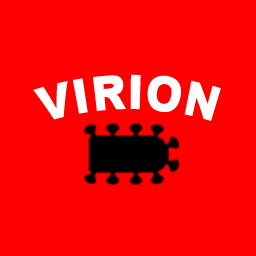
<style>
.page{position:relative;width:256px;height:256px;background:#ff0000}
.page>*{position:absolute;margin:0}
.t1{font:48px "Arial-Black";letter-spacing:0.05em;color:#ffffff;scale:0.8 1}
</style>
<div class="page">
<p class="t1" style="left:33px;top:74px;width:188px;height:47px">VIRION</p>
</div>
